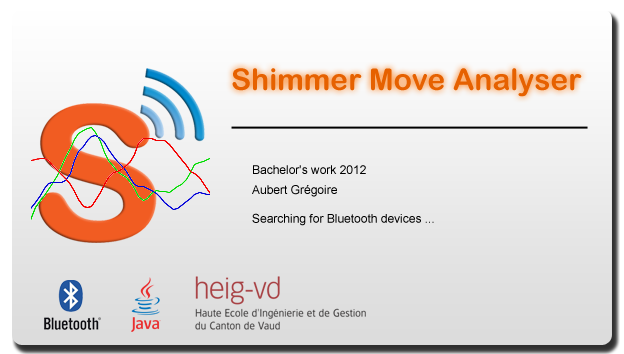
<style>
.page{position:relative;width:624px;height:354px}
.page>*{position:absolute;margin:0}
.t1{font:30px "ArialRoundedMTBold";color:#e66100}
.t2{font:12px "ArialMT";color:#000000}
.t3{font:12px/18px "ArialMT";color:#000000}
.t4{font:12px/20px "ArialMT";color:#000000}
</style>
<div class="page">
<p class="t1" style="left:232px;top:68px;width:350px;height:29px">Shimmer Move Analyser</p>
<p class="t2" style="left:252px;top:165px;width:182px;height:61px"><span class="t3">Bachelor's work 2012<br></span><span class="t4">Aubert Grégoire<br></span><br>Searching for Bluetooth devices ...</p>
</div>
